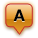
<style>
.page{position:relative;width:38px;height:38px}
.page>*{position:absolute;margin:0}
.t1{font:15.9px "HelveticaNeue-Bold";color:#000000}
</style>
<div class="page">
<p class="t1" style="left:13px;top:9px;width:12px;height:12px">A</p>
</div>
